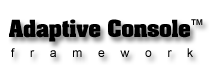
<style>
.page{position:relative;width:210px;height:80px;background:#ffffff}
.page>*{position:absolute;margin:0}
.t1{font:20px "AardvarkBold";color:#000000}
.t2{font:8px "Arial-BoldMT";color:#000000}
.t3{font:12px "ArialMT";letter-spacing:1.26em;color:#000000;scale:1.03 1}
</style>
<div class="page">
<p class="t1" style="left:9px;top:19px;width:181px;height:23px">Adaptive Console</p>
<p class="t2" style="left:191px;top:19px;width:12px;height:6px">TM</p>
<p class="t3" style="left:11px;top:48px;width:182px;height:9px">framework</p>
</div>
